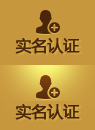
<style>
.page{position:relative;width:95px;height:130px;background:#c7973d}
.page>*{position:absolute;margin:0}
.t1{font:15.5px "MicrosoftYaHei";letter-spacing:-0.01em;color:#4b260b;font-weight:bold}
</style>
<div class="page">
<p class="t1" style="left:15px;top:38px;width:65px;height:16px">实名认证</p>
<p class="t1" style="left:15px;top:104px;width:65px;height:16px">实名认证</p>
</div>
